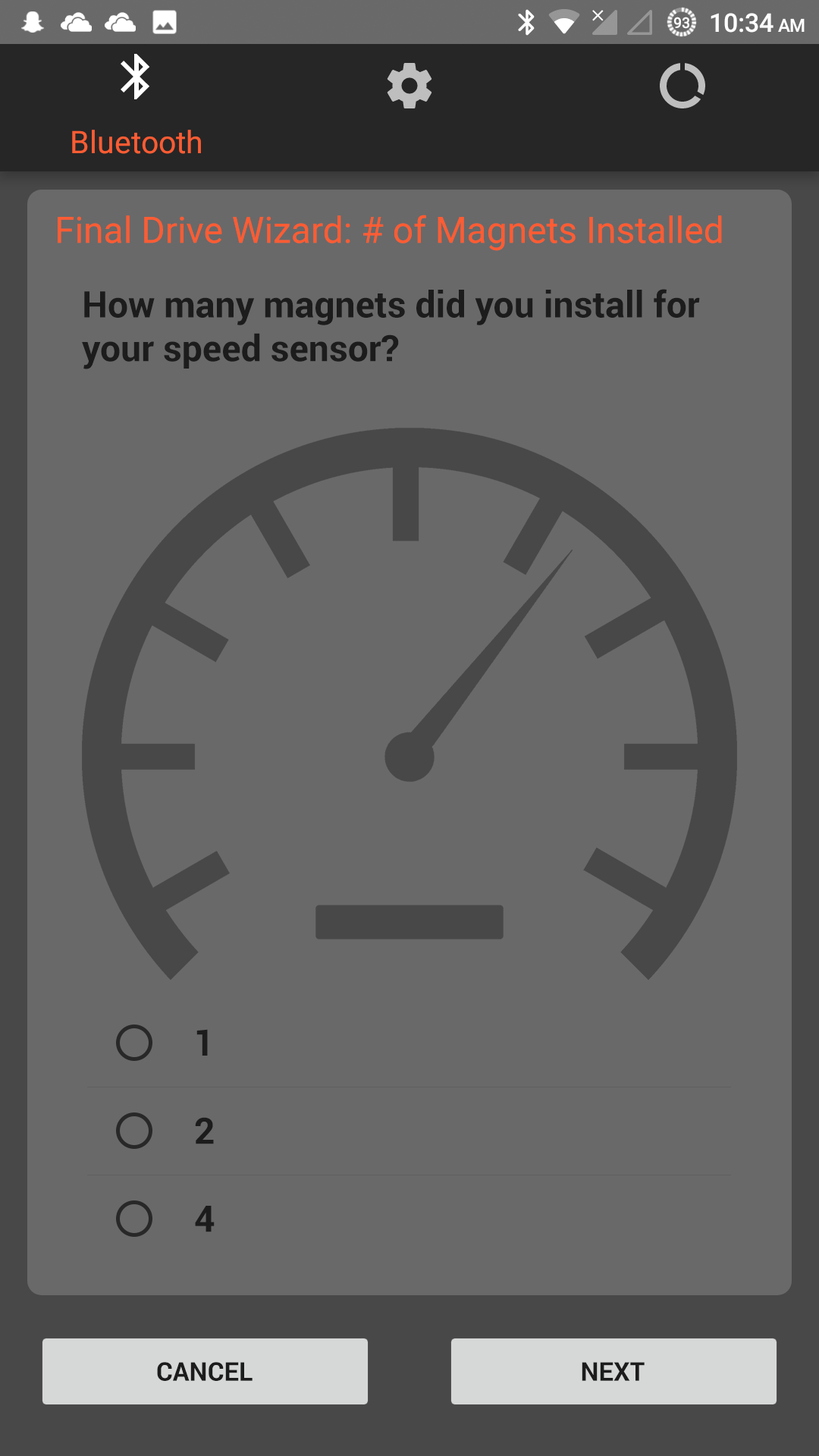
<style>
.page{position:relative;width:819px;height:1456px;background:#696969}
.page>*{position:absolute;margin:0}
.t1{font:36.4px "Roboto-Regular";color:#ff5c33}
.t2{font:36.4px "Roboto-Bold";color:#1c1c1c}
.t3{font:25.8px "Roboto-Bold";color:#1c1c1c}
</style>
<div class="page">
<p class="t1" style="left:58px;top:215px;width:664px;height:36px">Final Drive Wizard: # of Magnets Installed</p>
<p class="t2" style="left:82px;top:289px;width:618px;height:80px">How many magnets did you install for<br>your speed sensor?</p>
<p class="t2" style="left:196px;top:1029px;width:12px;height:27px">1</p>
<p class="t2" style="left:195px;top:1117px;width:19px;height:27px">2</p>
<p class="t2" style="left:195px;top:1206px;width:20px;height:26px">4</p>
<p class="t3" style="left:157px;top:1362px;width:96px;height:19px">CANCEL</p>
<p class="t3" style="left:582px;top:1362px;width:63px;height:19px">NEXT</p>
</div>
